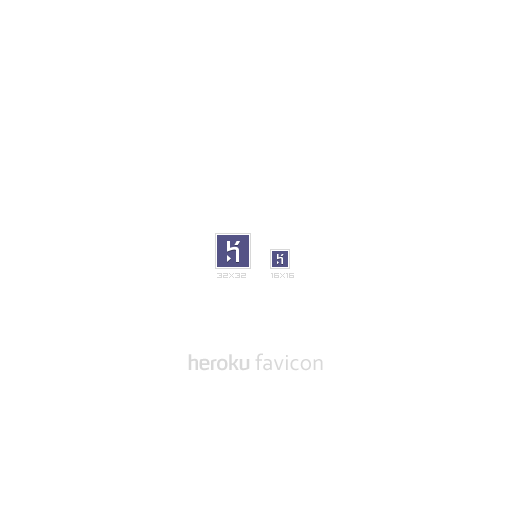
<style>
.page{position:relative;width:512px;height:512px;background:#ffffff}
.page>*{position:absolute;margin:0}
.t1{font:10px "VisitorTT1BRK";color:#d8d8d8}
.t2{font:23px "Corbel";color:#d8d8d8}
.t3{font:20px "HybreaRg-Regular";color:#d8d8d8}
</style>
<div class="page">
<p class="t1" style="left:217px;top:273px;width:29px;height:5px">32x32</p>
<p class="t1" style="left:271px;top:273px;width:23px;height:5px">16x16</p>
<p class="t2" style="left:255px;top:353px;width:68px;height:18px">favicon</p>
<p class="t3" style="left:188px;top:354px;width:62px;height:17px">heroku</p>
</div>
